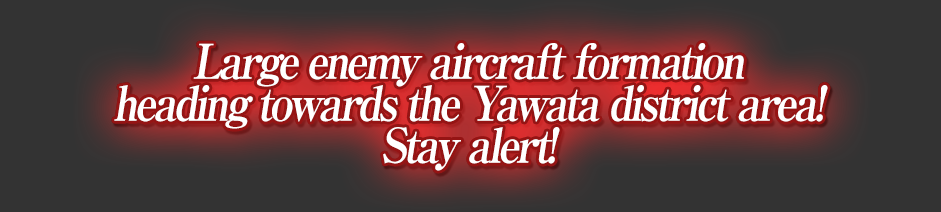
<style>
.page{position:relative;width:941px;height:212px;background:#333333}
.page>*{position:absolute;margin:0}
.t1{font:48px/42px "RyuminPro-ExBold";letter-spacing:-0.08em;color:#ffffff;font-style:italic;scale:0.9 1}
</style>
<div class="page">
<p class="t1" style="left:114px;top:43px;width:714px;height:128px;text-align:center">Large enemy aircraft formation<br>heading towards the Yawata district area!<br>Stay alert!</p>
</div>
